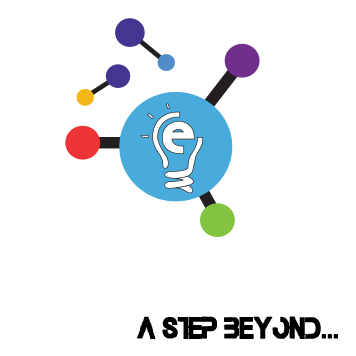
<style>
.page{position:relative;width:356px;height:356px;background:#ffffff}
.page>*{position:absolute;margin:0}
.t1{font:27.6px "TheLastCall-Regular";color:#000000;text-transform:uppercase;font-weight:bold;scale:0.87 1}
</style>
<div class="page">
<p class="t1" style="left:137px;top:316px;width:201px;height:23px">A STEP BEYOND...</p>
</div>
